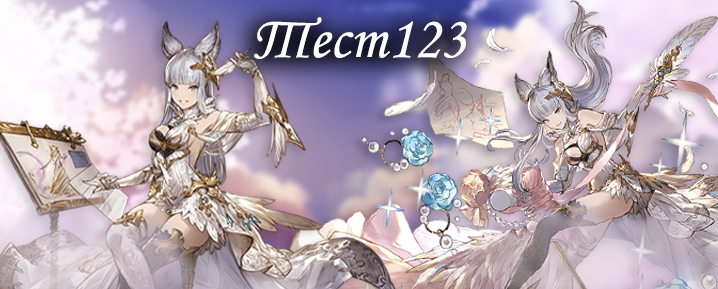
<style>
.page{position:relative;width:718px;height:289px}
.page>*{position:absolute;margin:0}
.t1{font:60px "MonotypeCorsiva";color:#ffffff}
</style>
<div class="page">
<p class="t1" style="left:254px;top:17px;width:213px;height:42px">Тест123</p>
</div>
